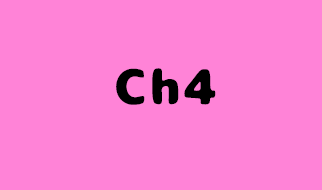
<style>
.page{position:relative;width:322px;height:190px;background:#ff83d7}
.page>*{position:absolute;margin:0}
.t1{font:50px "07NikumaruFont";letter-spacing:0.08em;color:#000000}
</style>
<div class="page">
<p class="t1" style="left:116px;top:68px;width:100px;height:37px">Ch4</p>
</div>
